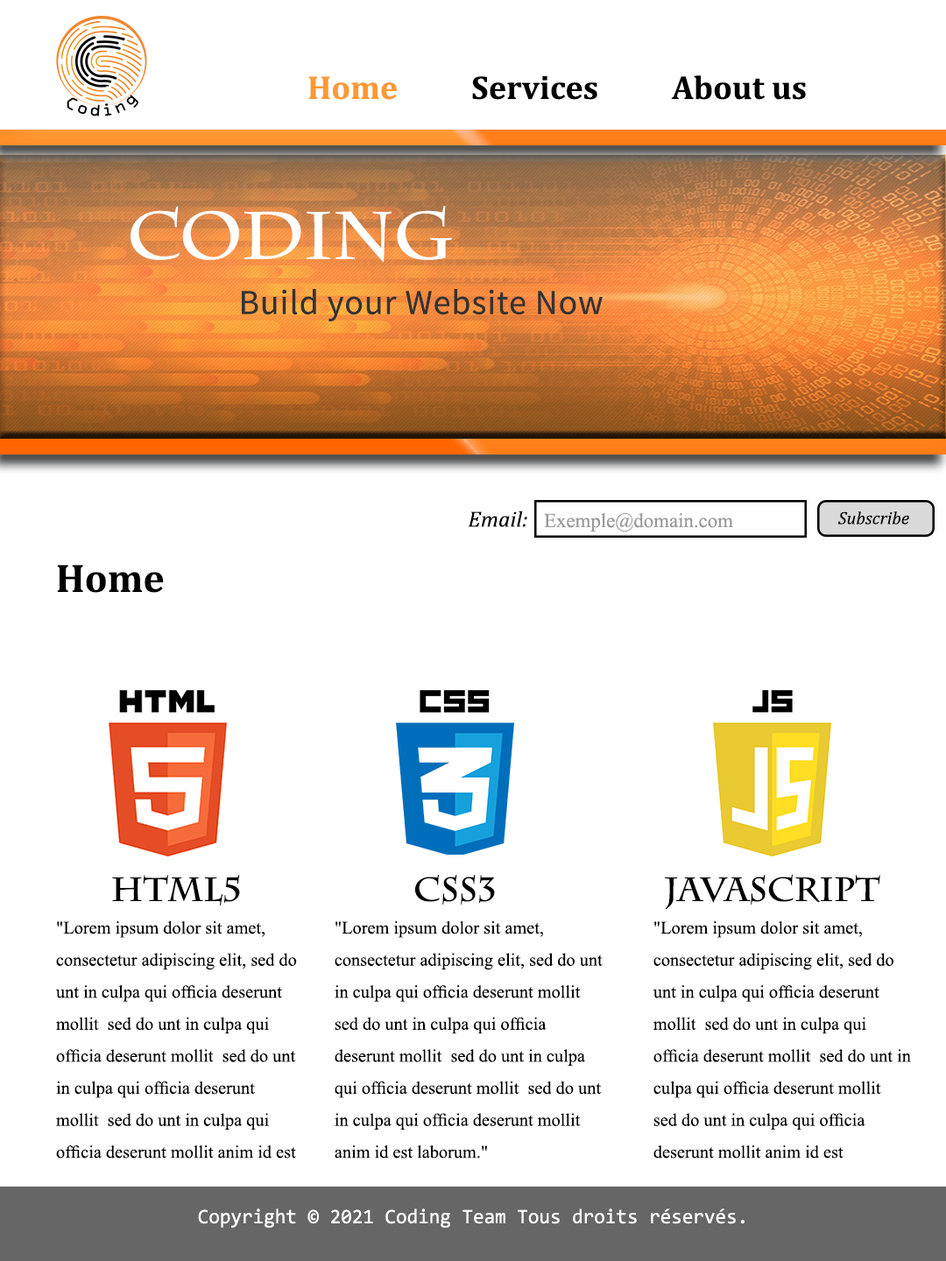
<style>
.page{position:relative;width:946px;height:1261px;background:#ffffff}
.page>*{position:absolute;margin:0}
.t1{font:33.4px "Cambria-Bold";color:#000000}
.t2{font:33.4px "Cambria-Bold";color:#ff9933}
.t3{font:66.7px "CharlemagneStd-Bold";color:#ffffff}
.t4{font:34.9px "SourceSansPro-Regular";letter-spacing:0.025em;color:#333333}
.t5{font:22.2px "Cambria-Italic";color:#000000}
.t6{font:20px "TimesNewRomanPSMT";color:#999999}
.t7{font:17.8px "Cambria-Italic";color:#000000}
.t8{font:40px "Cambria-Bold";color:#000000}
.t9{font:33.4px "CharlemagneStd-Bold";color:#000000}
.t10{font:17.8px/32px "TimesNewRomanPSMT";color:#000000}
.t11{font:20.7px "Consolas";color:#ffffff;scale:0.97 1}
</style>
<div class="page">
<p class="t1" style="left:308px;top:75px;width:498px;height:25px"><span class="t2">Home</span>          Services          About us</p>
<p class="t3" style="left:130px;top:206px;width:322px;height:57px">Coding</p>
<p class="t4" style="left:242px;top:289px;width:360px;height:32px">Build your Website Now</p>
<p class="t5" style="left:468px;top:510px;width:59px;height:17px">Email:</p>
<p class="t6" style="left:544px;top:513px;width:189px;height:19px">Exemple@domain.com</p>
<p class="t7" style="left:837px;top:511px;width:72px;height:14px">Subscribe</p>
<p class="t8" style="left:57px;top:565px;width:107px;height:28px">Home</p>
<p class="t9" style="left:112px;top:875px;width:128px;height:30px">HTML5</p>
<p class="t9" style="left:415px;top:874px;width:80px;height:31px">CSS3</p>
<p class="t9" style="left:665px;top:874px;width:215px;height:36px">JavaScript</p>
<p class="t10" style="left:56px;top:921px;width:241px;height:237px">"Lorem ipsum dolor sit amet, consectetur adipiscing elit, sed do unt in culpa qui officia deserunt mollit  sed do unt in culpa qui officia deserunt mollit  sed do unt in culpa qui officia deserunt mollit  sed do unt in culpa qui officia deserunt mollit anim id est laborum."</p>
<p class="t10" style="left:334px;top:921px;width:268px;height:237px">"Lorem ipsum dolor sit amet, consectetur adipiscing elit, sed do unt in culpa qui officia deserunt mollit  sed do unt in culpa qui officia deserunt mollit  sed do unt in culpa qui officia deserunt mollit  sed do unt in culpa qui officia deserunt mollit anim id est laborum."</p>
<p class="t10" style="left:652px;top:921px;width:259px;height:237px">"Lorem ipsum dolor sit amet, consectetur adipiscing elit, sed do unt in culpa qui officia deserunt mollit  sed do unt in culpa qui officia deserunt mollit  sed do unt in culpa qui officia deserunt mollit  sed do unt in culpa qui officia deserunt mollit anim id est laborum."</p>
<p class="t11" style="left:198px;top:1208px;width:546px;height:20px">Copyright © 2021 Coding Team Tous droits réservés.</p>
</div>
